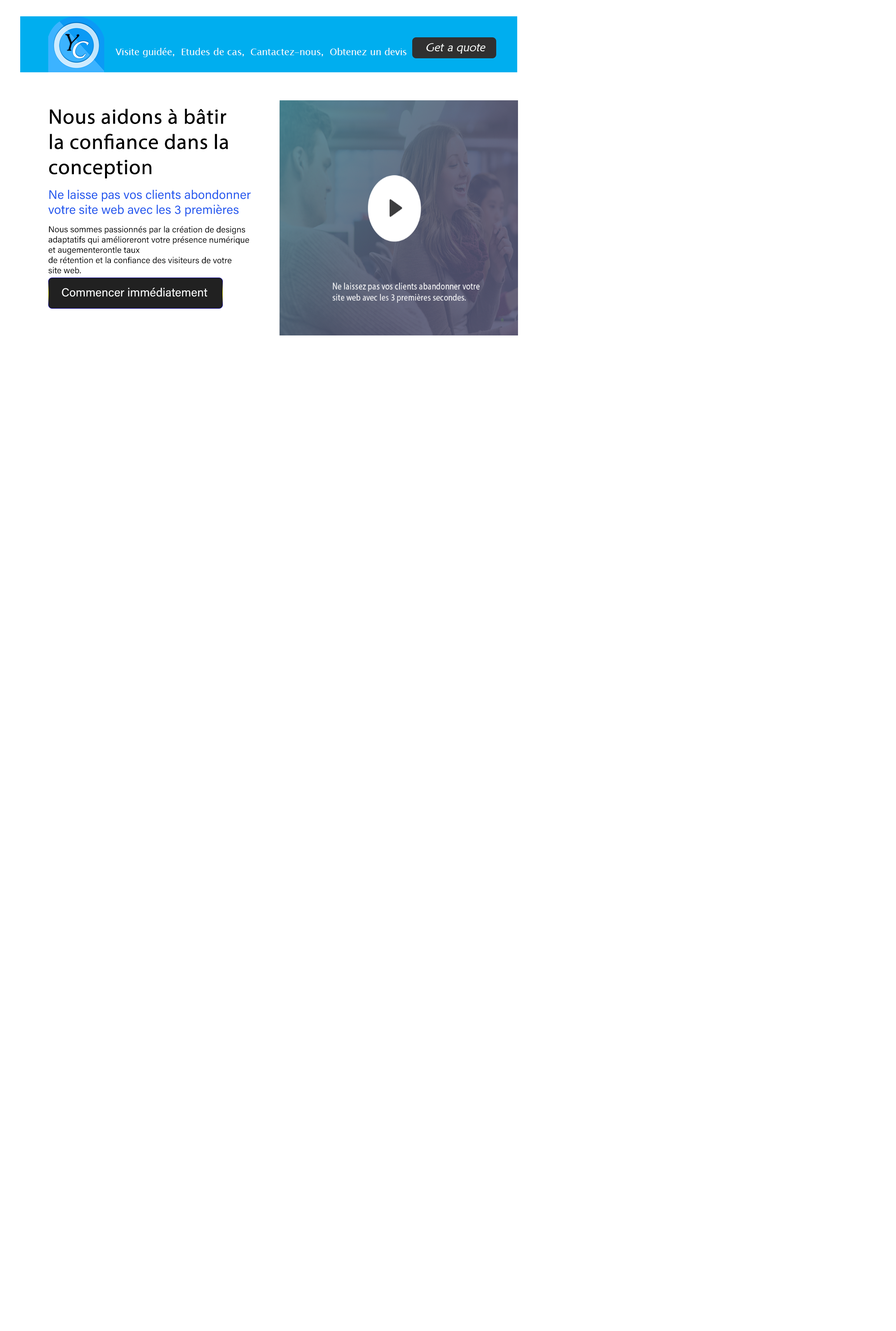
<style>
.page{position:relative;width:896px;height:1331px;background:#ffffff}
.page>*{position:absolute;margin:0}
.t1{font:9.3px "LucidaSansUnicode";color:#fcfcfc}
.t2{font:11.7px "MaiandraGD-Regular";color:#f8faf8;font-style:italic}
.t3{font:21px "MyriadPro-Regular";color:#000000;font-weight:bold}
.t4{font:12.4px "AcuminConcept-Regular";color:#2358ee;font-weight:bold}
.t5{font:8.6px "AcuminConcept-Regular";color:#060606;font-weight:bold}
.t6{font:11.7px "AcuminConcept-Regular";color:#fcfdfd;font-weight:bold}
</style>
<div class="page">
<p class="t1" style="left:115px;top:48px;width:291px;height:9px">Visite guidée,  Etudes de cas,  Cantactez-nous,  Obtenez un devis</p>
<p class="t2" style="left:426px;top:43px;width:59px;height:11px">Get a quote</p>
<p class="t3" style="left:49px;top:108px;width:179px;height:70px">Nous aidons à bâtir <br>la confiance dans la <br>conception</p>
<p class="t4" style="left:48px;top:190px;width:203px;height:27px">Ne laisse pas vos clients abondonner<br>votre site web avec les 3 premières</p>
<p class="t5" style="left:48px;top:226px;width:201px;height:48px">Nous sommes passionnés par la création de designs <br>adaptatifs qui amélioreront votre présence numérique <br>et augementerontle taux<br>de rétention et la confiance des visiteurs de votre <br>site web.</p>
<p class="t6" style="left:62px;top:288px;width:145px;height:9px">Commencer immédiatement</p>
</div>
